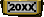
<style>
.page{position:relative;width:44px;height:17px}
.page>*{position:absolute;margin:0}
.t1{font:9.5px "InterTight-Black";letter-spacing:-0.04em;color:#000000}
</style>
<div class="page">
<p class="t1" style="left:9px;top:3px;width:26px;height:8px">20XX</p>
</div>
